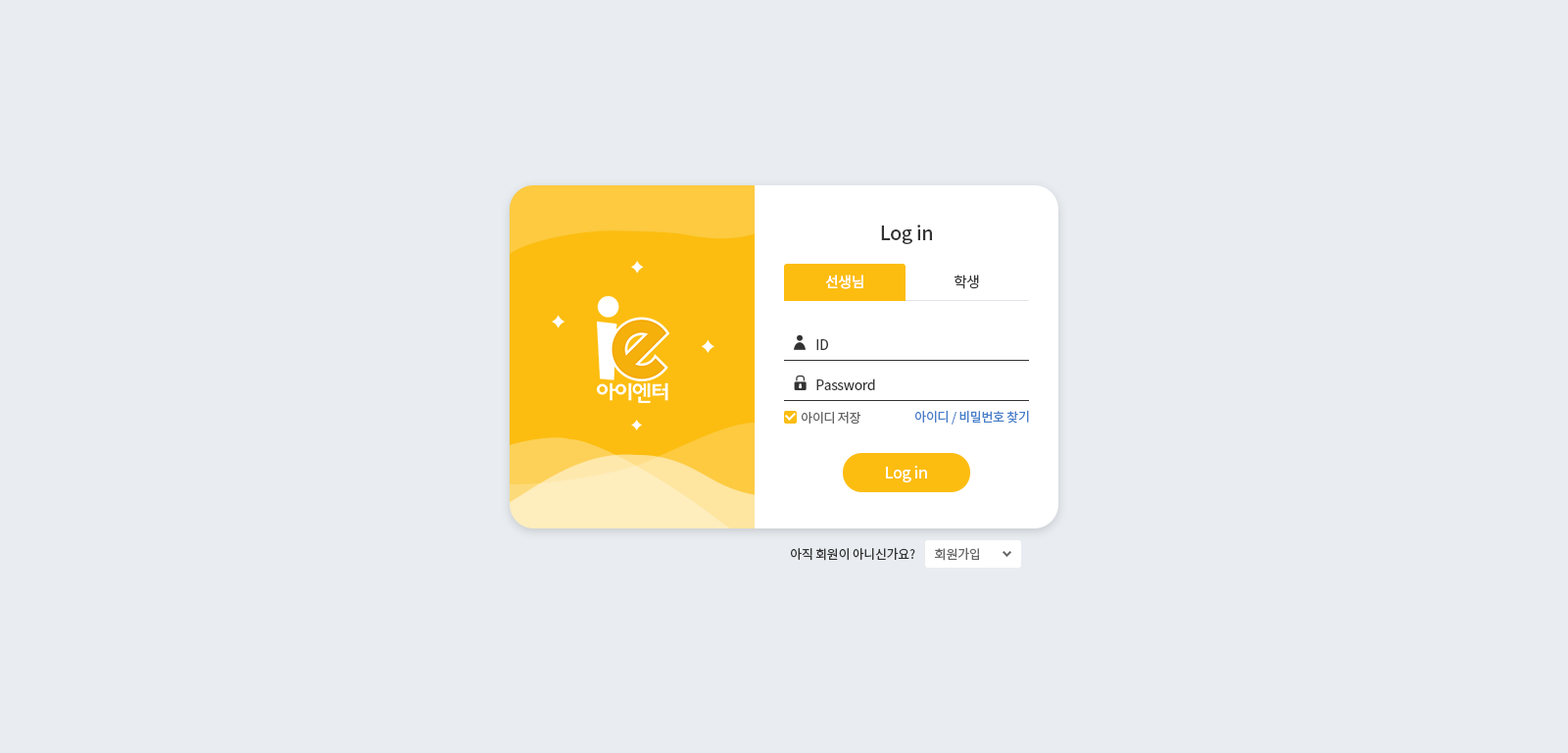
<style>
.page{position:relative;width:1568px;height:753px;background:#e9edf1}
.page>*{position:absolute;margin:0}
.t1{font:19.6px "NotoSansCJKkr-Medium";letter-spacing:-0.025em;color:#333333}
.t2{font:14.7px "NotoSansCJKkr-Medium";letter-spacing:-0.025em;color:#ffffff}
.t3{font:14.7px "NotoSansCJKkr-DemiLight";letter-spacing:-0.025em;color:#333333}
.t4{font:13.7px/40.2px "NotoSansCJKkr-Regular";letter-spacing:-0.025em;color:#333333}
.t5{font:12.7px "NotoSansCJKkr-Regular";letter-spacing:-0.025em;color:#666666}
.t6{font:12.7px "NotoSansCJKkr-Regular";letter-spacing:-0.025em;color:#457dc9}
.t7{font:15.7px "NotoSansCJKkr-Medium";letter-spacing:-0.025em;color:#ffffff}
.t8{font:12.7px "NotoSansCJKkr-Regular";letter-spacing:-0.025em;color:#333333}
</style>
<div class="page">
<p class="t1" style="left:881px;top:224px;width:51px;height:20px">Log in</p>
<p class="t2" style="left:825px;top:274px;width:38px;height:15px">선생님</p>
<p class="t3" style="left:955px;top:274px;width:24px;height:15px">학생</p>
<p class="t4" style="left:816px;top:339px;width:59px;height:51px">ID<br>Password</p>
<p class="t5" style="left:802px;top:411px;width:59px;height:13px">아이디 저장</p>
<p class="t6" style="left:915px;top:410px;width:114px;height:14px">아이디 / 비밀번호 찾기</p>
<p class="t7" style="left:886px;top:466px;width:41px;height:16px">Log in</p>
<p class="t8" style="left:791px;top:547px;width:124px;height:14px">아직 회원이 아니신가요?</p>
<p class="t5" style="left:935px;top:547px;width:44px;height:14px">회원가입</p>
</div>
